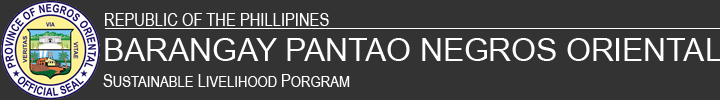
<style>
.page{position:relative;width:720px;height:100px;background:#333333}
.page>*{position:absolute;margin:0}
.t1{font:18px "ArialNarrow";color:#ffffff}
.t2{font:31.7px "ArialNarrow";color:#ffffff;scale:1.22 1}
.t3{font:16px "ArialNarrow";color:#ffffff}
</style>
<div class="page">
<p class="t1" style="left:105px;top:13px;width:224px;height:13px">REPUBLIC OF THE PHILLIPINES</p>
<p class="t2" style="left:105px;top:38px;width:617px;height:23px">BARANGAY PANTAO NEGROS ORIENTAL</p>
<p class="t3" style="left:103px;top:74px;width:247px;height:13px"><span class="t1">S</span>USTAINABLE<span class="t1"> L</span>IVELIHOOD <span class="t1">P</span>ORGRAM</p>
</div>
